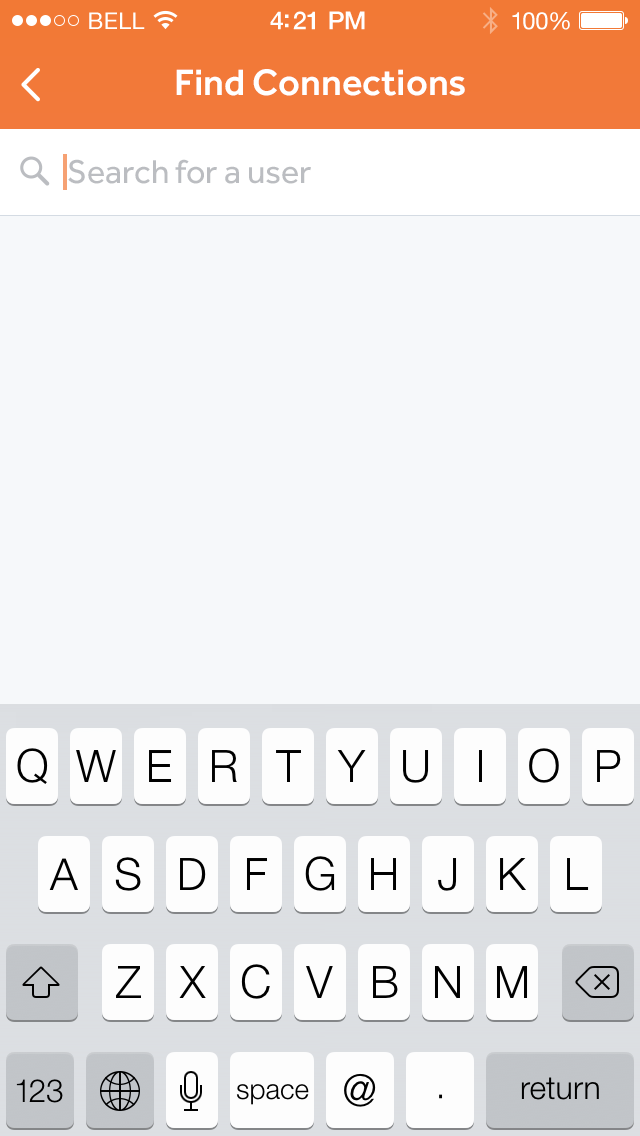
<style>
.page{position:relative;width:640px;height:1136px;background:#f6f8fa}
.page>*{position:absolute;margin:0}
.t1{font:23px "HelveticaNeue";letter-spacing:0.02em;color:#ffffff}
.t2{font:25px "HelveticaNeue-Medium";letter-spacing:-0.02em;color:#ffffff}
.t3{font:24px "HelveticaNeue";letter-spacing:-0.02em;color:#ffffff}
.t4{font:38px "Effra-Medium";color:#ffffff}
.t5{font:34px "Effra-Regular";color:#bbbdc1}
</style>
<div class="page">
<p class="t1" style="left:89px;top:12px;width:56px;height:17px">BELL</p>
<p class="t2" style="left:270px;top:11px;width:95px;height:19px">4:21 PM</p>
<p class="t3" style="left:512px;top:12px;width:58px;height:18px">100%</p>
<p class="t4" style="left:176px;top:69px;width:289px;height:27px">Find Connections</p>
<p class="t5" style="left:68px;top:159px;width:243px;height:25px">Search for a user</p>
</div>
